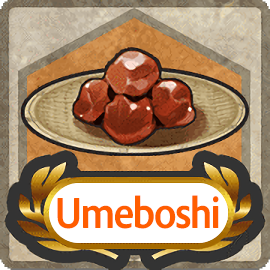
<style>
.page{position:relative;width:270px;height:270px}
.page>*{position:absolute;margin:0}
.t1{font:45px "AdobeClean-Bold";letter-spacing:-0.04em;color:#ff5d00;scale:0.9 1}
</style>
<div class="page">
<p class="t1" style="left:57px;top:195px;width:162px;height:34px">Umeboshi</p>
</div>
